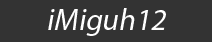
<style>
.page{position:relative;width:212px;height:42px;background:#333333}
.page>*{position:absolute;margin:0}
.t1{font:30px "MyriadPro-Regular";color:#ffffff;font-style:italic}
</style>
<div class="page">
<p class="t1" style="left:48px;top:8px;width:118px;height:28px">iMiguh12</p>
</div>
